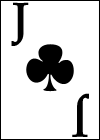
<style>
.page{position:relative;width:100px;height:140px;background:#ffffff}
.page>*{position:absolute;margin:0}
.t1{font:48px "PalatinoLinotype-Roman";color:#000000;font-weight:bold}
</style>
<div class="page">
<p class="t1" style="left:11px;top:2px;width:18px;height:44px">J</p>
<p class="t1" style="left:72px;top:93px;width:17px;height:44px;rotate:180deg">J</p>
</div>
